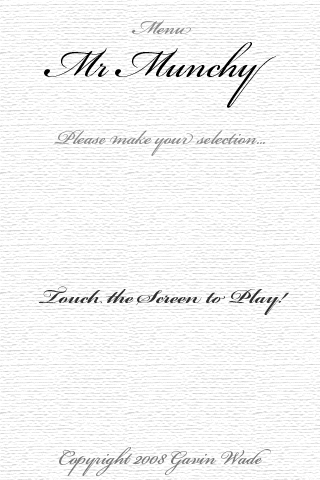
<style>
.page{position:relative;width:320px;height:480px;background:#ffffff}
.page>*{position:absolute;margin:0}
.t1{font:30px "BickhamScriptPro-Regular";color:#919191}
.t2{font:60px "BickhamScriptPro-Regular";color:#000000}
.t3{font:30px "BickhamScriptPro-Bold";color:#303030}
.t4{font:30px "BickhamScriptPro-Regular";color:#7d7d7d}
</style>
<div class="page">
<p class="t1" style="left:132px;top:20px;width:59px;height:14px">Menu</p>
<p class="t2" style="left:44px;top:42px;width:232px;height:66px">Mr Munchy</p>
<p class="t1" style="left:54px;top:130px;width:211px;height:26px">Please make your selection...</p>
<p class="t3" style="left:38px;top:286px;width:251px;height:29px">Touch the Screen to Play!</p>
<p class="t4" style="left:59px;top:447px;width:212px;height:29px">Copyright 2008 Gavin Wade</p>
</div>
